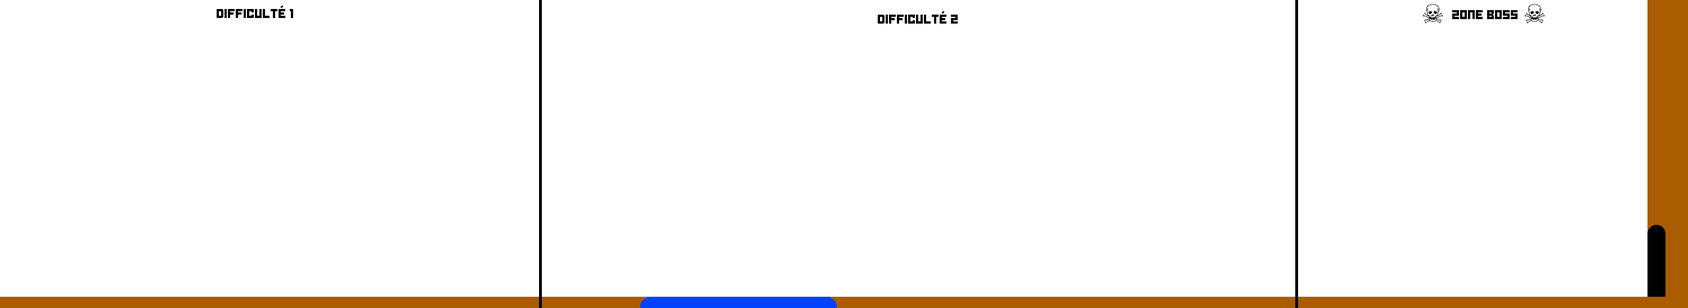
<style>
.page{position:relative;width:1688px;height:308px;background:#ffffff}
.page>*{position:absolute;margin:0}
.t1{font:9px "Ode-to-Idle-Gaming";color:#000000}
</style>
<div class="page">
<p class="t1" style="left:217px;top:6px;width:76px;height:12px">Difficulté 1</p>
<p class="t1" style="left:878px;top:11px;width:79px;height:13px">Difficulté 2</p>
<p class="t1" style="left:1452px;top:10px;width:65px;height:9px">ZONE BOSS</p>
</div>
